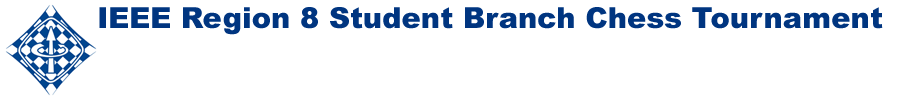
<style>
.page{position:relative;width:900px;height:100px;background:#ffffff}
.page>*{position:absolute;margin:0}
.t1{font:29px "Arial-Black";color:#003580}
</style>
<div class="page">
<p class="t1" style="left:99px;top:7px;width:784px;height:28px">IEEE Region 8 Student Branch Chess Tournament</p>
</div>
